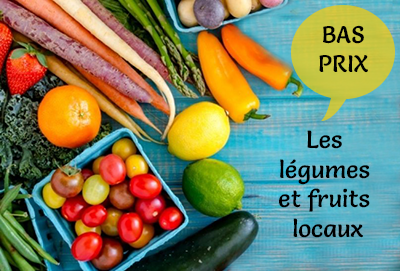
<style>
.page{position:relative;width:400px;height:271px}
.page>*{position:absolute;margin:0}
.t1{font:23.8px "Salsa-Regular";color:#000000}
.t2{font:24.8px "Salsa-Regular";color:#000000}
</style>
<div class="page">
<p class="t1" style="left:319px;top:25px;width:49px;height:48px;text-align:center">BAS<br>PRIX</p>
<p class="t2" style="left:279px;top:130px;width:91px;height:108px;text-align:center">Les <br>légumes <br>et fruits <br>locaux</p>
</div>
